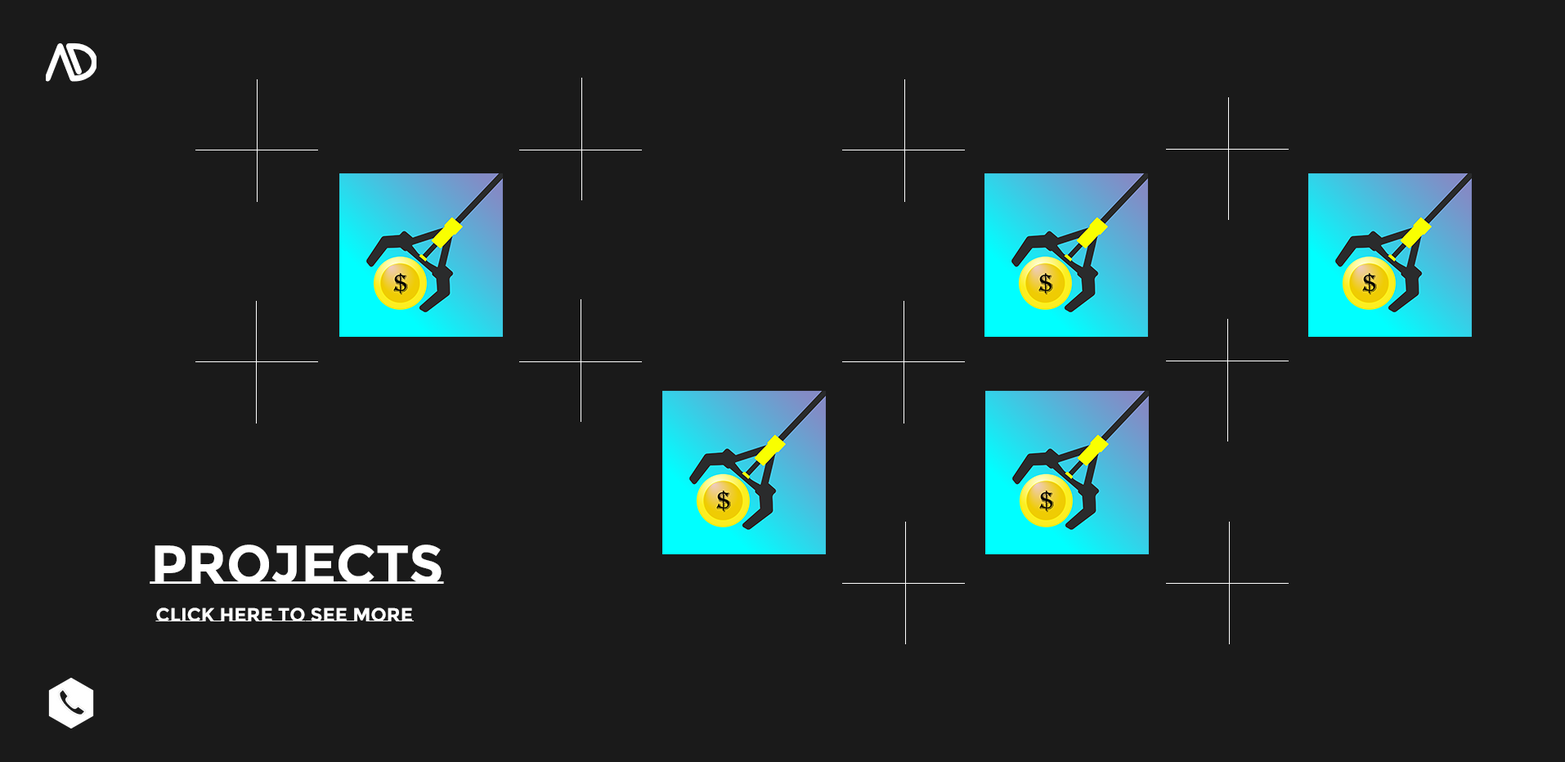
<style>
.page{position:relative;width:1565px;height:762px;background:#1a1a1a}
.page>*{position:absolute;margin:0}
.t1{font:54.5px "MontserratSubrayada-Bold";color:#ffffff}
.t2{font:19.1px "MontserratSubrayada-Bold";color:#ffffff}
</style>
<div class="page">
<p class="t1" style="left:150px;top:545px;width:294px;height:39px">PROJECTS</p>
<p class="t2" style="left:155px;top:607px;width:259px;height:14px">CLIck here to see more</p>
</div>
